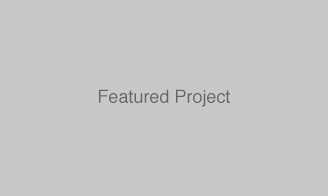
<style>
.page{position:relative;width:328px;height:196px;background:#c8c8c8}
.page>*{position:absolute;margin:0}
.t1{font:18px "Helvetica";color:#646464}
</style>
<div class="page">
<p class="t1" style="left:99px;top:89px;width:131px;height:18px">Featured Project</p>
</div>
